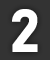
<style>
.page{position:relative;width:50px;height:60px;background:#333333}
.page>*{position:absolute;margin:0}
.t1{font:60px "Bahnschrift-Bold";color:#ffffff}
</style>
<div class="page">
<p class="t1" style="left:12px;top:9px;width:26px;height:43px">2</p>
</div>
